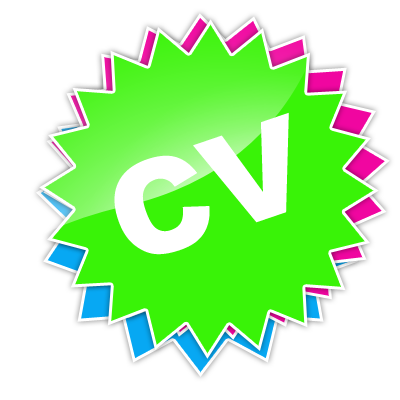
<style>
.page{position:relative;width:400px;height:400px;background:#ffffff}
.page>*{position:absolute;margin:0}
.t1{font:129.9px "Arial-Black";letter-spacing:0.03em;color:#ffffff}
</style>
<div class="page">
<p class="t1" style="left:114px;top:112px;width:175px;height:143px;rotate:-19deg">CV</p>
</div>
